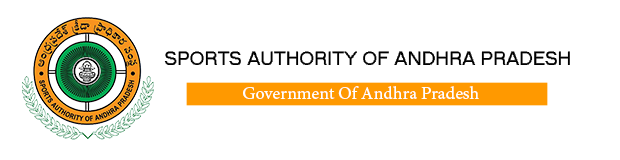
<style>
.page{position:relative;width:620px;height:160px;background:#ffffff}
.page>*{position:absolute;margin:0}
.t1{font:18.8px "MS Sans Serif";color:#000000}
.t2{font:18px "MinionPro-Regular";color:#ffffff}
</style>
<div class="page">
<p class="t1" style="left:164px;top:51px;width:406px;height:14px">SPORTS AUTHORITY OF ANDHRA PRADESH</p>
<p class="t2" style="left:243px;top:86px;width:236px;height:13px">Government Of Andhra Pradesh</p>
</div>
